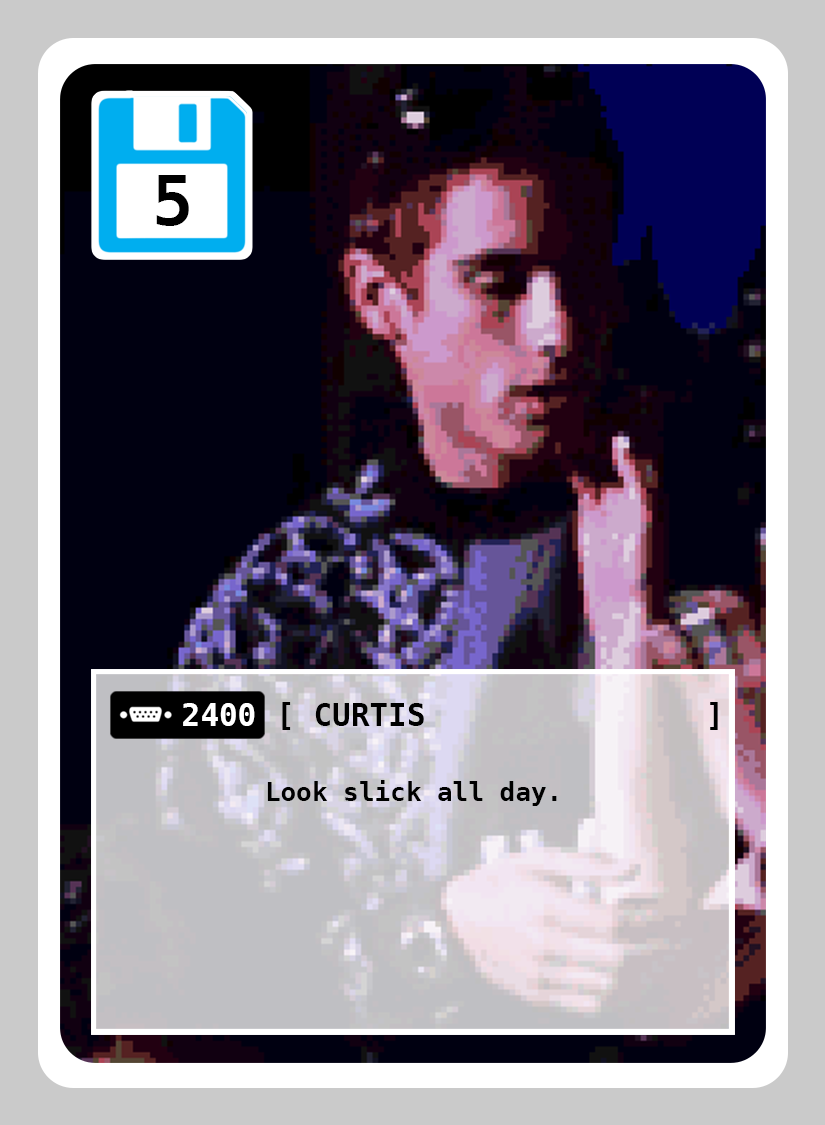
<style>
.page{position:relative;width:825px;height:1125px}
.page>*{position:absolute;margin:0}
.t1{font:69px "DejaVuSansMono-Bold";color:#000000}
.t2{font:31px "DejaVuSansMono-Bold";color:#000000}
.t3{font:31px "DejaVuSansMono-Bold";color:#ffffff}
.t4{font:26px "DejaVuSansMono-Bold";color:#000000}
</style>
<div class="page">
<p class="t1" style="left:156px;top:175px;width:33px;height:51px">5</p>
<p class="t2" style="left:282px;top:702px;width:436px;height:28px">[                      ]</p>
<p class="t3" style="left:183px;top:703px;width:72px;height:23px">2400</p>
<p class="t2" style="left:315px;top:703px;width:109px;height:23px">CURTIS</p>
<p class="t4" style="left:267px;top:780px;width:290px;height:26px">Look slick all day.</p>
</div>
